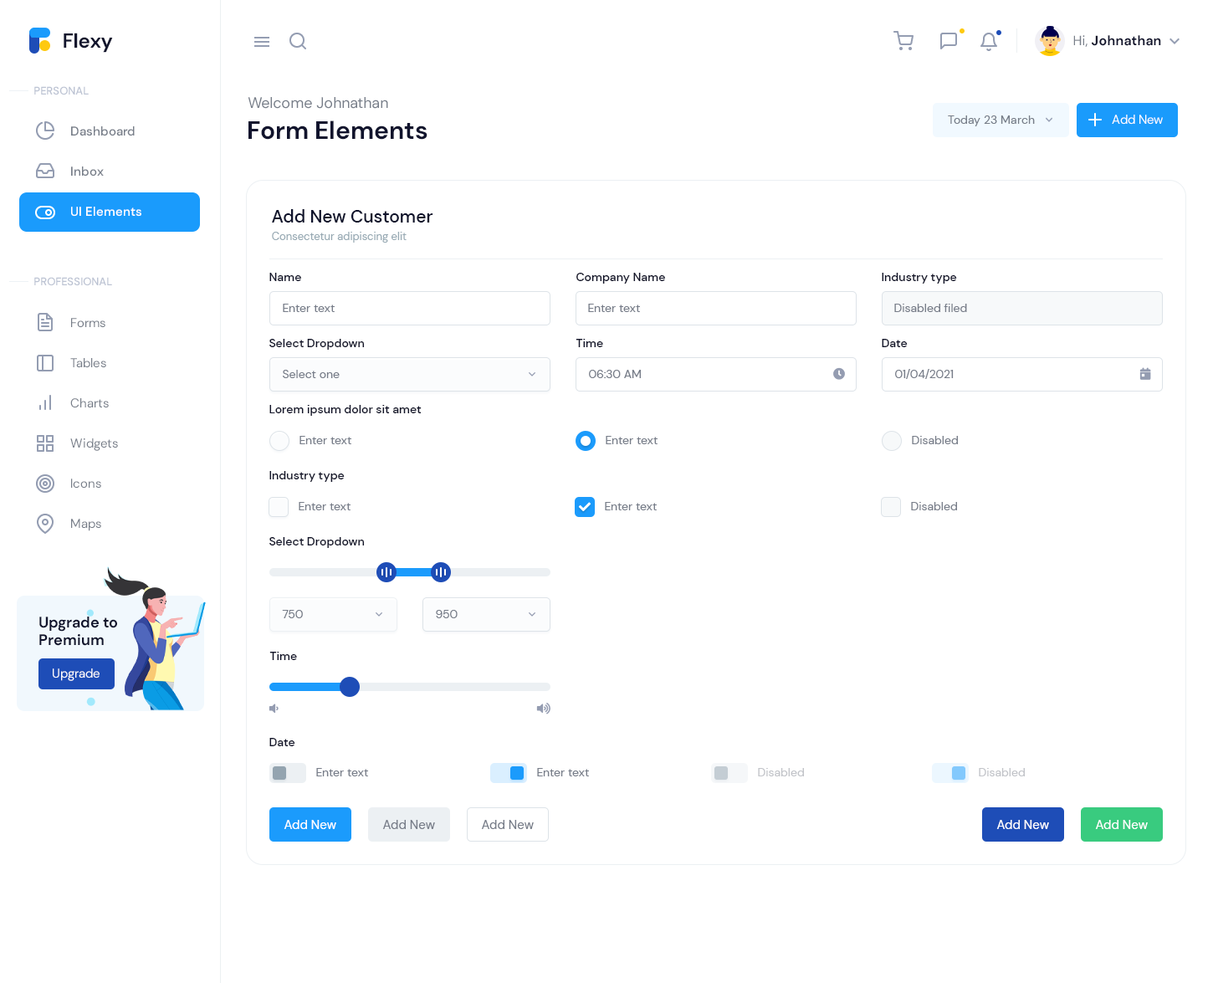
<style>
.page{position:relative;width:1213px;height:983px;background:#ffffff}
.page>*{position:absolute;margin:0}
.t1{font:20.1px "DMSans-Bold";color:#11142d}
.t2{font:13.4px "DMSans-Bold";color:#11142d}
.t3{font:13.4px "DMSans-Regular";color:#777e89}
.t4{font:10.9px "DMSans-Medium";color:#bcc3d3}
.t5{font:15.1px "DMSans-Regular";color:#777e89}
.t6{font:25.1px "DMSans-Bold";color:#11142d}
.t7{font:11.7px "DMSans-Regular";color:#777e89}
.t8{font:12.5px "DMSans-Regular";color:#ffffff}
.t9{font:12.5px/40.2px "DMSans-Medium";color:#777e89}
.t10{font:12.5px/40.2px "DMSans-Medium";color:#ffffff}
.t11{font:17.6px "DMSans-Medium";color:#0f132c}
.t12{font:10.9px "DMSans-Regular";color:#98aab4}
.t13{font:11.7px "DMSans-Medium";color:#13152a}
.t14{font:11.7px "DMSans-Regular";color:#777d89}
.t15{font:12.5px/40.2px "DMSans-Regular";color:#777e89}
.t16{font:15.1px "DMSans-Bold";color:#11142d}
.t17{font:11.7px "DMSans-Regular";color:#c2c4c9}
.t18{font:12.5px "DMSans-Regular";color:#777d89}
</style>
<div class="page">
<p class="t1" style="left:64px;top:33px;width:49px;height:20px">Flexy</p>
<p class="t2" style="left:1073px;top:35px;width:88px;height:12px"><span class="t3">Hi, </span>Johnathan</p>
<p class="t4" style="left:34px;top:86px;width:55px;height:9px">PERSONAL</p>
<p class="t5" style="left:248px;top:97px;width:140px;height:12px">Welcome Johnathan</p>
<p class="t6" style="left:248px;top:120px;width:179px;height:20px">Form Elements</p>
<p class="t7" style="left:948px;top:115px;width:87px;height:11px">Today 23 March</p>
<p class="t8" style="left:1112px;top:115px;width:51px;height:10px">Add New</p>
<p class="t9" style="left:71px;top:126px;width:70px;height:91px">Dashboard<br>Inbox<br><span class="t10">UI Elements</span></p>
<p class="t11" style="left:272px;top:209px;width:161px;height:14px">Add New Customer</p>
<p class="t12" style="left:272px;top:232px;width:135px;height:11px">Consectetur adipiscing elit</p>
<p class="t4" style="left:34px;top:277px;width:78px;height:9px">PROFESSIONAL</p>
<p class="t13" style="left:269px;top:273px;width:32px;height:8px">Name</p>
<p class="t13" style="left:576px;top:273px;width:89px;height:11px">Company Name</p>
<p class="t13" style="left:882px;top:273px;width:75px;height:11px">Industry type</p>
<p class="t14" style="left:283px;top:304px;width:52px;height:8px">Enter text</p>
<p class="t14" style="left:588px;top:304px;width:52px;height:8px">Enter text</p>
<p class="t14" style="left:894px;top:304px;width:73px;height:8px">Disabled filed</p>
<p class="t15" style="left:70px;top:318px;width:48px;height:213px">Forms<br>Tables<br>Charts<br>Widgets<br>Icons<br>Maps</p>
<p class="t13" style="left:269px;top:339px;width:96px;height:11px">Select Dropdown</p>
<p class="t13" style="left:576px;top:339px;width:27px;height:8px">Time</p>
<p class="t13" style="left:882px;top:339px;width:26px;height:8px">Date</p>
<p class="t14" style="left:283px;top:370px;width:57px;height:8px">Select one</p>
<p class="t14" style="left:589px;top:370px;width:52px;height:8px">06:30 AM</p>
<p class="t14" style="left:895px;top:369px;width:59px;height:10px">01/04/2021</p>
<p class="t13" style="left:269px;top:405px;width:153px;height:11px">Lorem ipsum dolor sit amet</p>
<p class="t14" style="left:300px;top:436px;width:51px;height:8px">Enter text</p>
<p class="t14" style="left:606px;top:436px;width:52px;height:8px">Enter text</p>
<p class="t14" style="left:912px;top:436px;width:46px;height:8px">Disabled</p>
<p class="t13" style="left:269px;top:471px;width:76px;height:11px">Industry type</p>
<p class="t14" style="left:299px;top:502px;width:52px;height:8px">Enter text</p>
<p class="t14" style="left:605px;top:502px;width:52px;height:8px">Enter text</p>
<p class="t14" style="left:911px;top:502px;width:46px;height:8px">Disabled</p>
<p class="t13" style="left:269px;top:537px;width:96px;height:11px">Select Dropdown</p>
<p class="t16" style="left:39px;top:617px;width:78px;height:29px">Upgrade to<br>Premium</p>
<p class="t14" style="left:282px;top:610px;width:21px;height:8px">750</p>
<p class="t14" style="left:436px;top:610px;width:22px;height:8px">950</p>
<p class="t13" style="left:269px;top:652px;width:28px;height:8px">Time</p>
<p class="t8" style="left:53px;top:668px;width:47px;height:13px">Upgrade</p>
<p class="t13" style="left:269px;top:738px;width:26px;height:8px">Date</p>
<p class="t14" style="left:316px;top:768px;width:52px;height:8px">Enter text</p>
<p class="t14" style="left:537px;top:768px;width:52px;height:8px">Enter text</p>
<p class="t17" style="left:758px;top:768px;width:46px;height:8px">Disabled</p>
<p class="t17" style="left:979px;top:768px;width:46px;height:8px">Disabled</p>
<p class="t8" style="left:284px;top:820px;width:52px;height:9px">Add New</p>
<p class="t18" style="left:382px;top:820px;width:53px;height:9px">Add New</p>
<p class="t18" style="left:481px;top:820px;width:53px;height:9px">Add New</p>
<p class="t8" style="left:996px;top:820px;width:53px;height:9px">Add New</p>
<p class="t8" style="left:1095px;top:820px;width:53px;height:9px">Add New</p>
</div>
